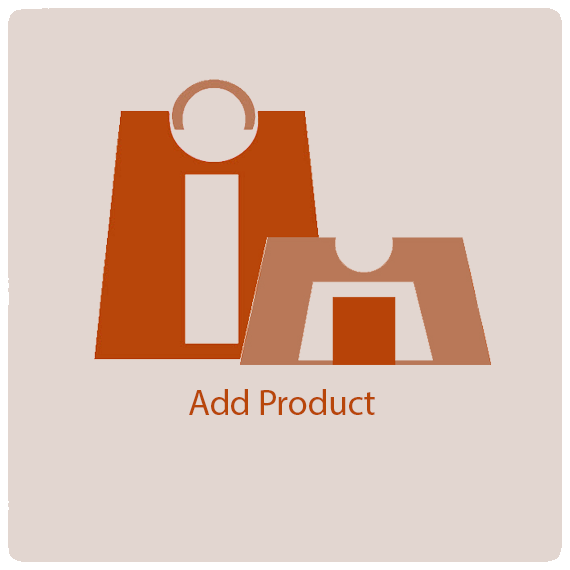
<style>
.page{position:relative;width:570px;height:570px;background:#e2d6d0}
.page>*{position:absolute;margin:0}
.t1{font:36px "MyriadPro-Regular";color:#b8460a}
</style>
<div class="page">
<p class="t1" style="left:189px;top:389px;width:186px;height:26px">Add Product</p>
</div>
